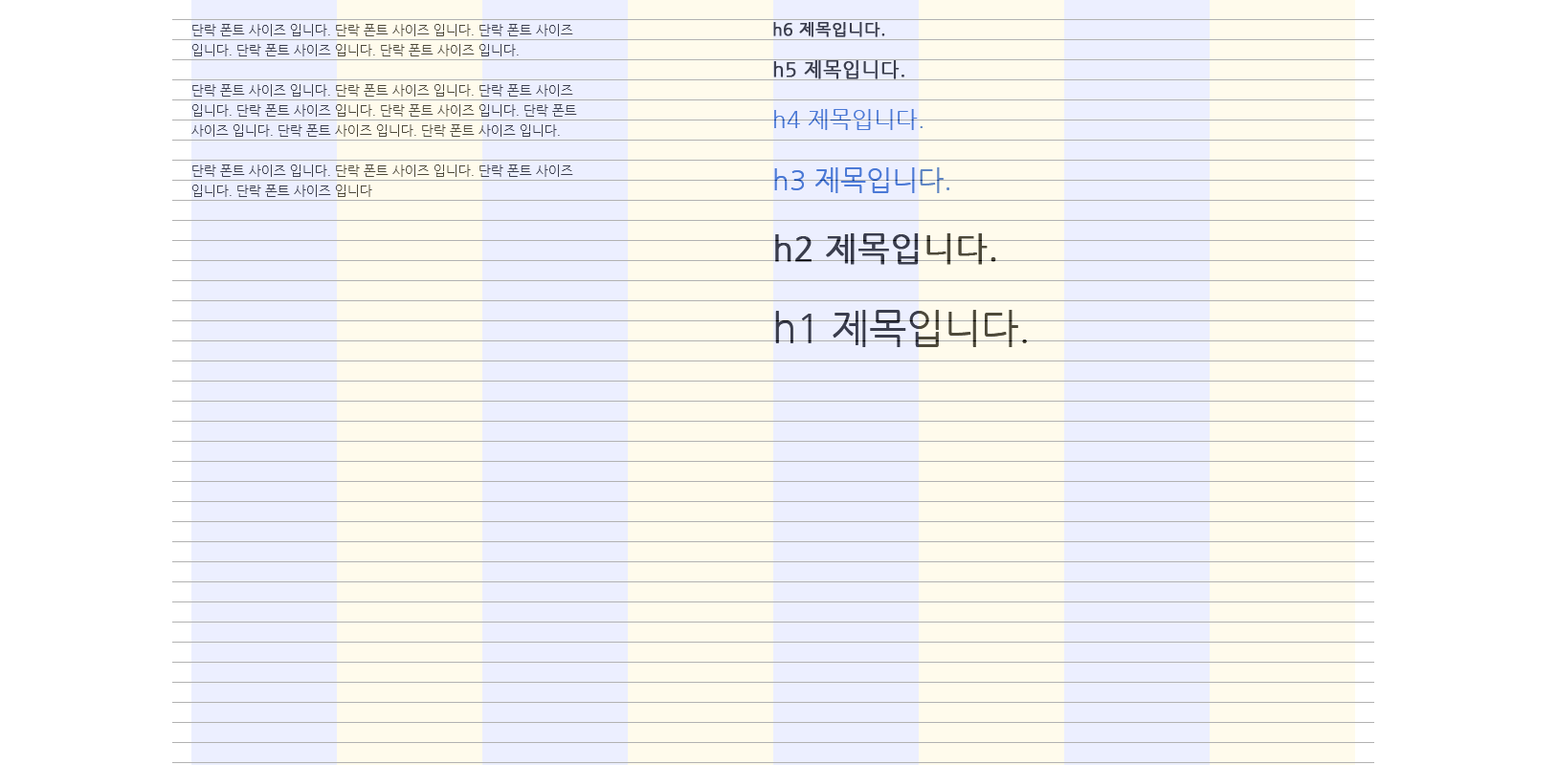
<style>
.page{position:relative;width:1558px;height:765px;background:#fffbec}
.page>*{position:absolute;margin:0}
.t1{font:13.4px "NanumGothic";color:#3a3d4d}
</style>
<div class="page">
<p class="t1" style="left:191px;top:24px;width:386px;height:173px">단락 폰트 사이즈 입니다. 단락 폰트 사이즈 입니다. 단락 폰트 사이즈 입니다. 단락 폰트 사이즈 입니다. 단락 폰트 사이즈 입니다.<br>단락 폰트 사이즈 입니다. 단락 폰트 사이즈 입니다. 단락 폰트 사이즈 입니다. 단락 폰트 사이즈 입니다. 단락 폰트 사이즈 입니다. 단락 폰트 사이즈 입니다. 단락 폰트 사이즈 입니다. 단락 폰트 사이즈 입니다.<br>단락 폰트 사이즈 입니다. 단락 폰트 사이즈 입니다. 단락 폰트 사이즈 입니다. 단락 폰트 사이즈 입니다</p>
</div>
